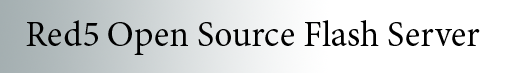
<style>
.page{position:relative;width:524px;height:73px;background:#ffffff}
.page>*{position:absolute;margin:0}
.t1{font:36px "MinionPro-Regular";color:#000000}
</style>
<div class="page">
<p class="t1" style="left:26px;top:20px;width:454px;height:35px">Red5 Open Source Flash Server</p>
</div>
